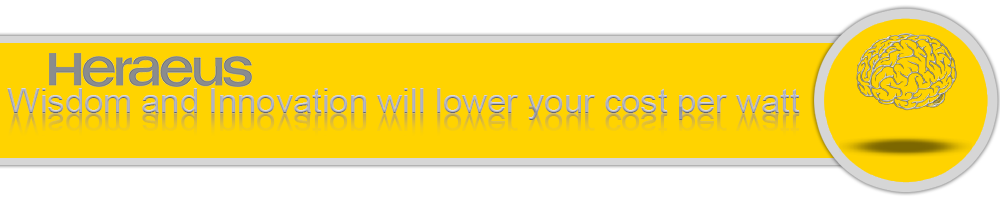
<style>
.page{position:relative;width:1000px;height:200px;background:#ffd300}
.page>*{position:absolute;margin:0}
.t1{font:34.5px "ArialMT";color:#b2b5c4}
.t2{font:34.5px "ArialMT"}
</style>
<div class="page">
<p class="t1" style="left:7px;top:88px;width:793px;height:32px">Wisdom and Innovation will lower your cost per watt</p>
<p class="t2" style="left:7px;top:106px;width:793px;height:32px">Wisdom and Innovation will lower your cost per watt</p>
</div>
